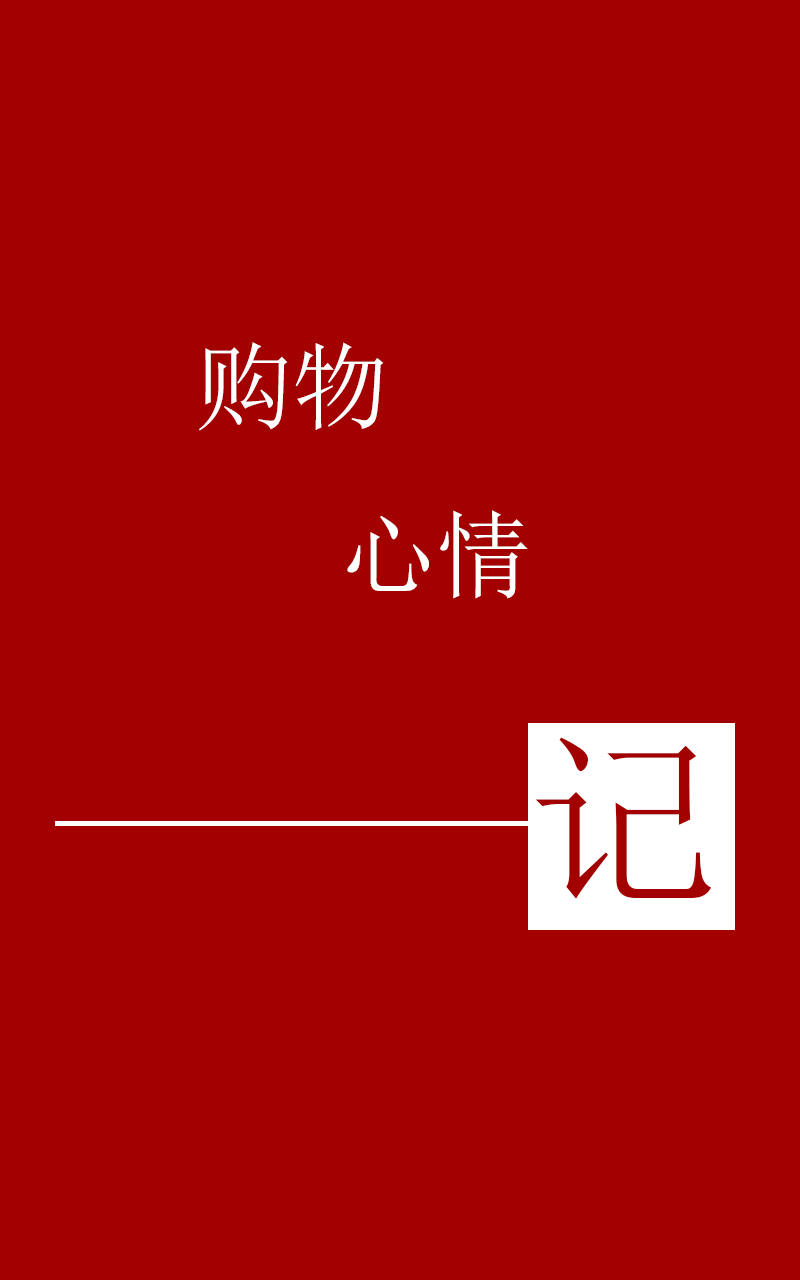
<style>
.page{position:relative;width:800px;height:1280px;background:#a30000}
.page>*{position:absolute;margin:0}
.t1{font:96px "SimSun";color:#ffffff}
.t2{font:190.9px "SimSun";color:#a30000}
</style>
<div class="page">
<p class="t1" style="left:199px;top:342px;width:329px;height:257px">购物<br>   心情</p>
<p class="t2" style="left:535px;top:737px;width:177px;height:162px">记</p>
<p class="t2" style="left:535px;top:737px;width:177px;height:162px">记</p>
</div>
